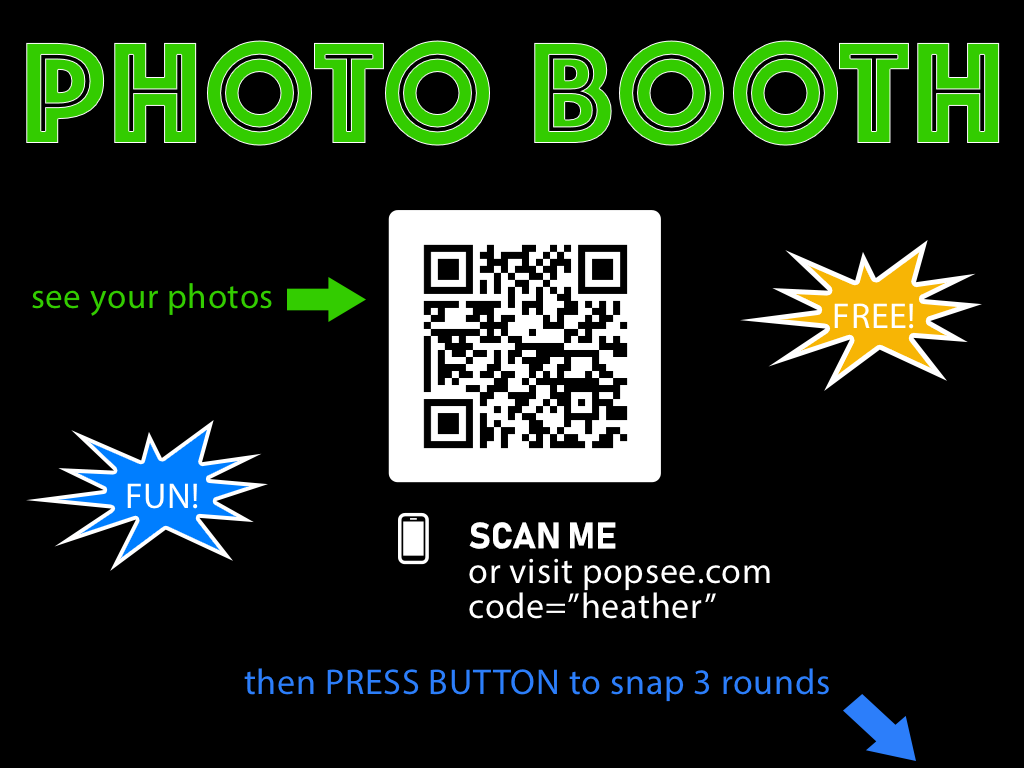
<style>
.page{position:relative;width:1024px;height:768px;background:#000000}
.page>*{position:absolute;margin:0}
.t1{font:150px "Phosphate-Inline";letter-spacing:0.02em;color:#33cc00}
.t2{font:35px "MyriadPro-Regular";letter-spacing:0.02em;color:#33cc00}
.t3{font:36px "MyriadPro-Regular";letter-spacing:0.02em;color:#ffffff}
.t4{font:36px/35px "MyriadPro-Regular";letter-spacing:0.02em;color:#ffffff}
.t5{font:36px "MyriadPro-Regular";letter-spacing:0.02em;color:#2c7efa}
</style>
<div class="page">
<p class="t1" style="left:26px;top:40px;width:974px;height:106px">PHOTO BOOTH</p>
<p class="t2" style="left:32px;top:283px;width:240px;height:33px">see your photos</p>
<p class="t3" style="left:834px;top:303px;width:80px;height:26px">FREE!</p>
<p class="t3" style="left:127px;top:483px;width:71px;height:26px">FUN!</p>
<p class="t4" style="left:469px;top:558px;width:301px;height:61px">or visit popsee.com<br>code=”heather”</p>
<p class="t5" style="left:244px;top:668px;width:585px;height:34px">then PRESS BUTTON to snap 3 rounds</p>
</div>
